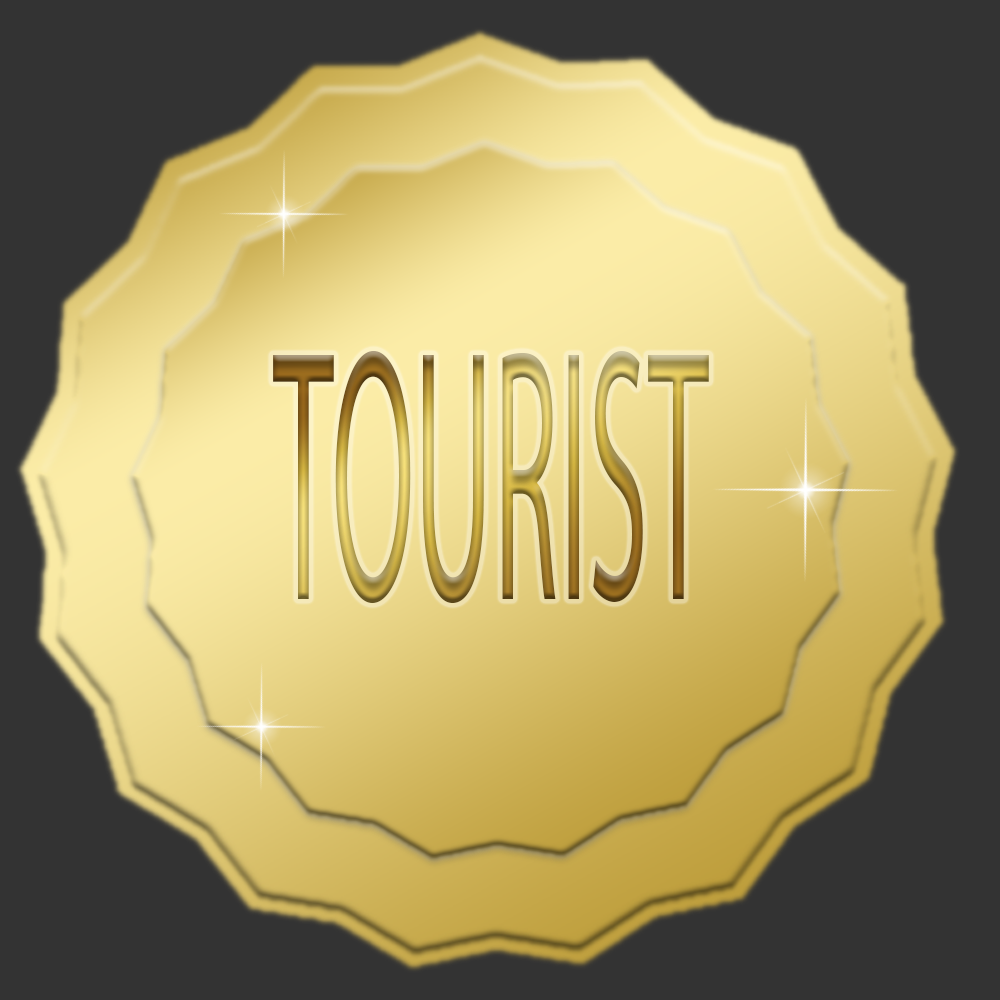
<style>
.page{position:relative;width:1000px;height:1000px;background:#333333}
.page>*{position:absolute;margin:0}
.t1{font:361.4px "MyriadPro-Regular";scale:0.34 1}
</style>
<div class="page">
<p class="t1" style="left:273px;top:350px;width:436px;height:254px">TOURIST</p>
</div>
